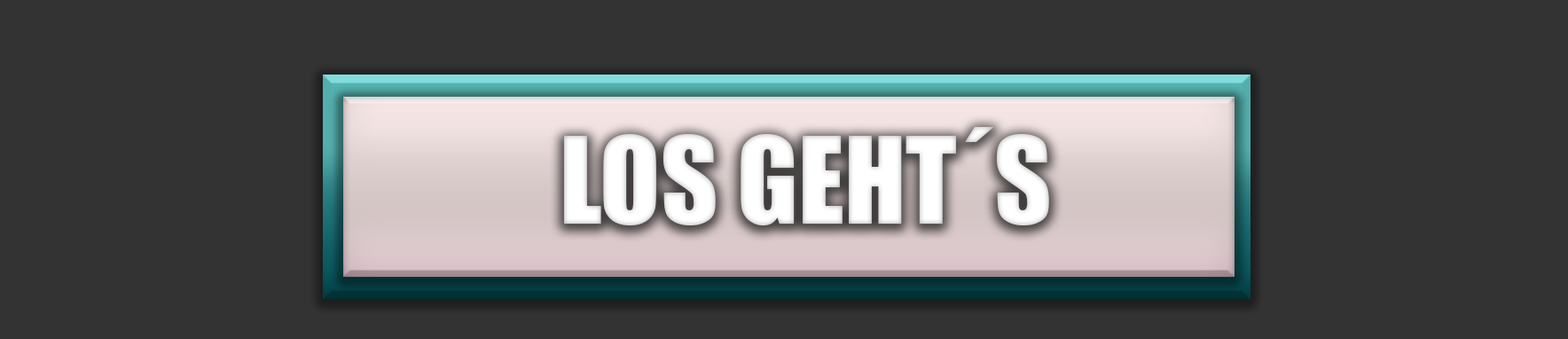
<style>
.page{position:relative;width:1568px;height:339px;background:#333333}
.page>*{position:absolute;margin:0}
.t1{font:110.9px "Impact";color:#ffffff}
</style>
<div class="page">
<p class="t1" style="left:564px;top:127px;width:485px;height:98px">LOS GEHT´S</p>
</div>
